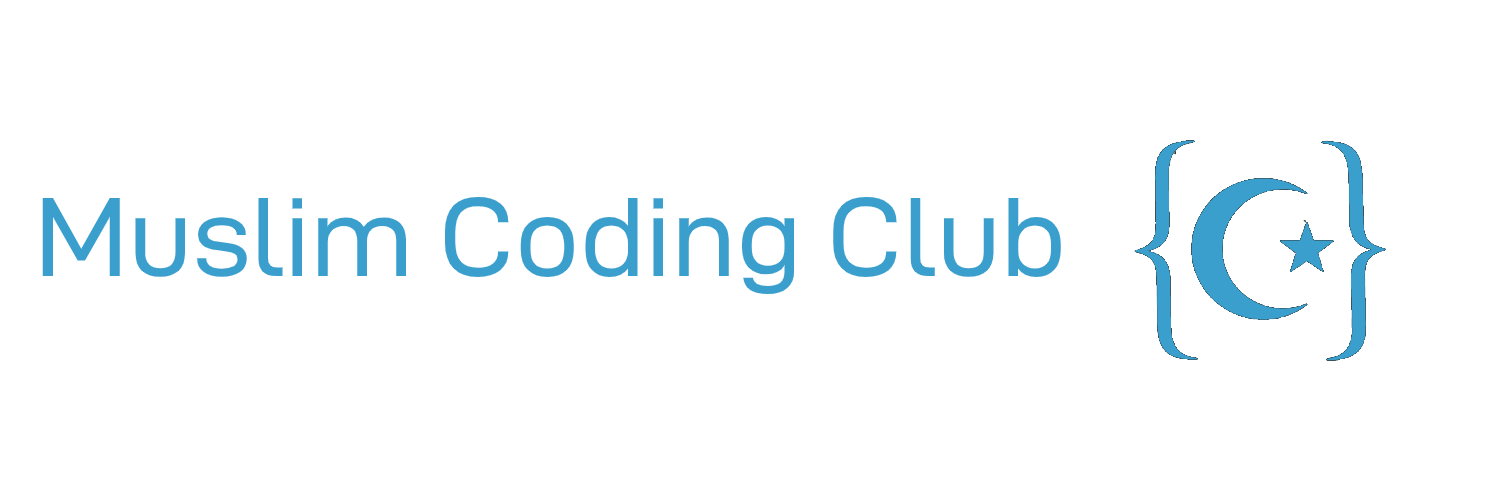
<style>
.page{position:relative;width:1500px;height:500px;background:#ffffff}
.page>*{position:absolute;margin:0}
.t1{font:113px "D-DINExp";color:#3a9fcd}
</style>
<div class="page">
<p class="t1" style="left:42px;top:196px;width:1019px;height:99px">Muslim Coding Club</p>
</div>
